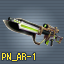
<style>
.page{position:relative;width:64px;height:64px}
.page>*{position:absolute;margin:0}
.t1{font:10px "MS-Gothic";color:#ffe434}
</style>
<div class="page">
<p class="t1" style="left:2px;top:53px;width:33px;height:8px">PN_AR-1</p>
</div>
